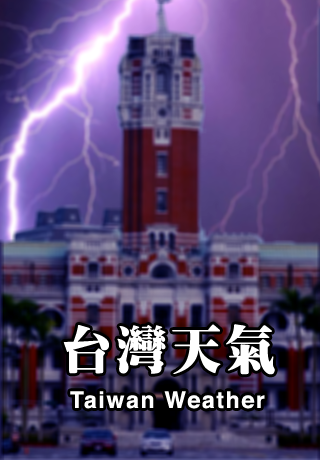
<style>
.page{position:relative;width:320px;height:460px}
.page>*{position:absolute;margin:0}
.t1{font:51px "ARMingB5-Ultra";letter-spacing:0.075em;color:#ffffff}
.t2{font:22.9px "Helvetica-Bold";letter-spacing:0.075em;color:#ffffff}
</style>
<div class="page">
<p class="t1" style="left:63px;top:324px;width:212px;height:51px">台灣天氣</p>
<p class="t2" style="left:70px;top:391px;width:195px;height:18px">Taiwan Weather</p>
</div>
